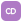
<style>
.page{position:relative;width:22px;height:22px;background:#af7ac5}
.page>*{position:absolute;margin:0}
.t1{font:8px "Tahoma";color:#ffffff}
</style>
<div class="page">
<p class="t1" style="left:5px;top:8px;width:11px;height:7px">CD</p>
</div>
